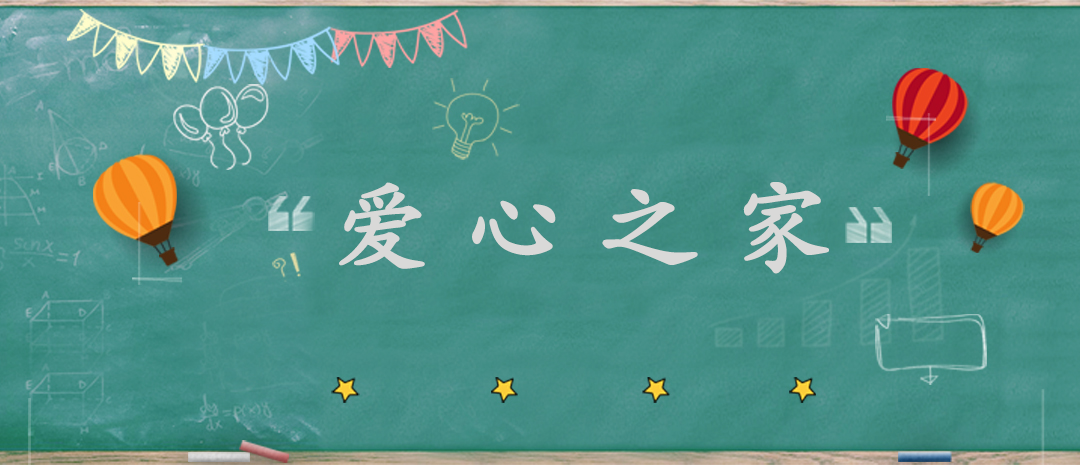
<style>
.page{position:relative;width:1080px;height:465px}
.page>*{position:absolute;margin:0}
.t1{font:100px "AdobeKaitiStd-Regular";color:#d9d9d8;font-weight:bold}
</style>
<div class="page">
<p class="t1" style="left:339px;top:182px;width:490px;height:92px">爱 心 之 家</p>
</div>
